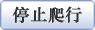
<style>
.page{position:relative;width:95px;height:30px}
.page>*{position:absolute;margin:0}
.t1{font:17px "STZhongsong";color:#333333;font-weight:bold}
</style>
<div class="page">
<p class="t1" style="left:12px;top:6px;width:70px;height:17px">停止爬行</p>
</div>
